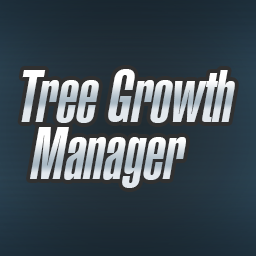
<style>
.page{position:relative;width:256px;height:256px}
.page>*{position:absolute;margin:0}
.t1{font:72px "Swiss911BT-UltraCompressed";font-style:italic}
</style>
<div class="page">
<p class="t1" style="left:21px;top:69px;width:214px;height:54px">Tree Growth</p>
<p class="t1" style="left:30px;top:127px;width:156px;height:61px">Manager</p>
</div>
